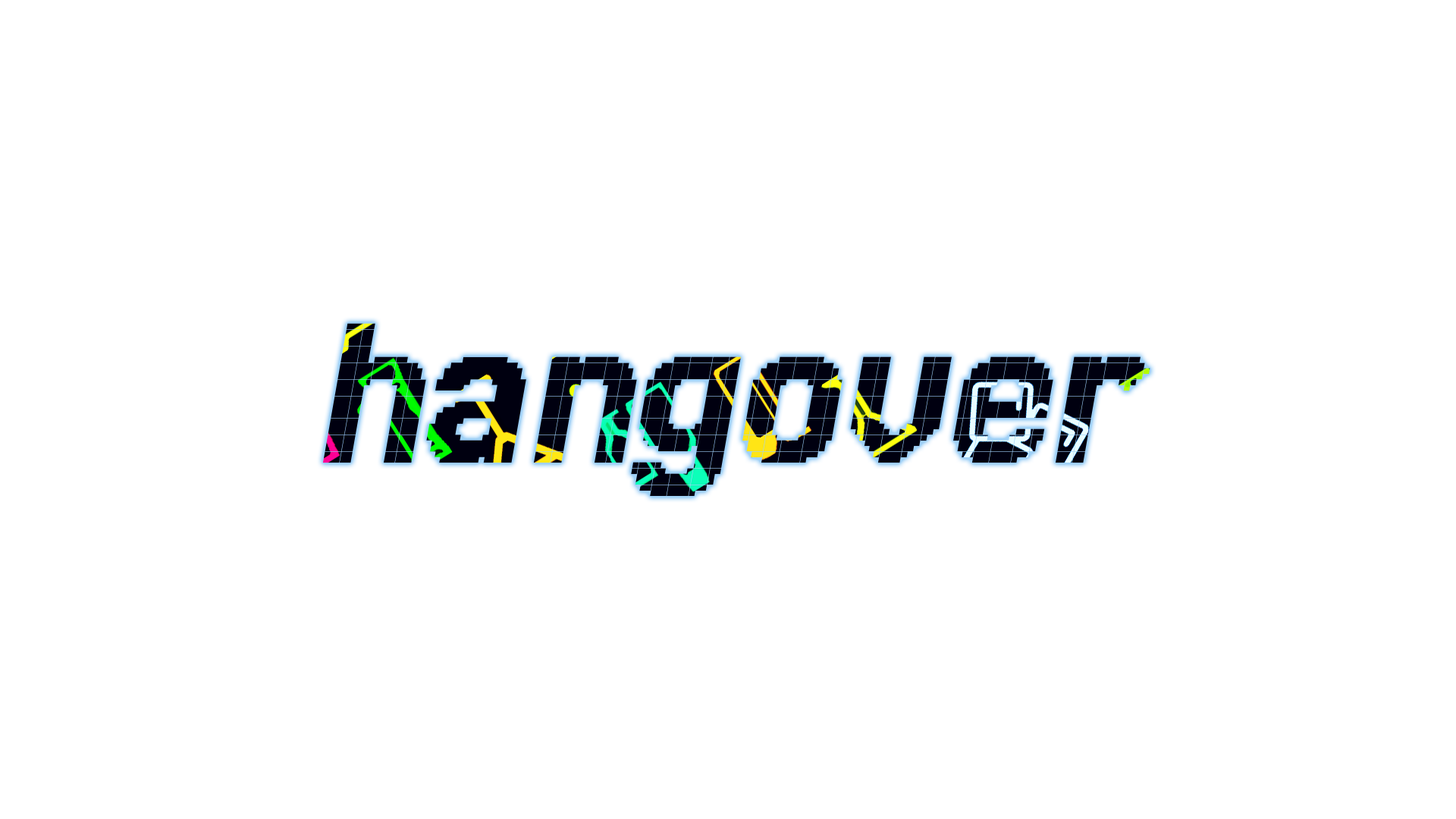
<style>
.page{position:relative;width:1456px;height:819px;background:#ffffff}
.page>*{position:absolute;margin:0}
.t1{font:227.5px "Jersey25-Regular";color:#000000;font-style:italic}
</style>
<div class="page">
<p class="t1" style="left:323px;top:323px;width:827px;height:173px">hangover</p>
</div>
